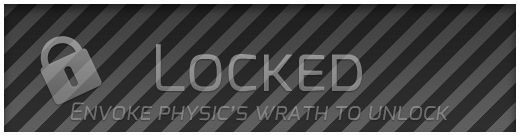
<style>
.page{position:relative;width:520px;height:136px}
.page>*{position:absolute;margin:0}
.t1{font:24px "Exo-Italic";color:#838383;font-variant:small-caps}
.t2{font:64px "Exo-Regular";color:#838383;font-variant:small-caps}
</style>
<div class="page">
<p class="t1" style="left:70px;top:44px;width:380px;height:77px;text-align:center"><span class="t2">Locked<br></span>Envoke physic’s wrath to unlock</p>
</div>
